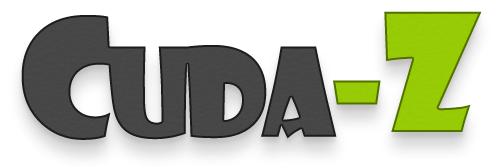
<style>
.page{position:relative;width:500px;height:167px;background:#ffffff}
.page>*{position:absolute;margin:0}
.t1{font:120px "ShowcardGothic-Reg";letter-spacing:-0.05em;color:#444444}
.t2{font:160px "ShowcardGothic-Reg";letter-spacing:-0.05em;color:#444444}
.t3{font:160px "ShowcardGothic-Reg";letter-spacing:-0.05em;color:#96cd00}
</style>
<div class="page">
<p class="t1" style="left:21px;top:15px;width:316px;height:125px"><span class="t2">C</span>UDA</p>
<p class="t3" style="left:333px;top:11px;width:149px;height:121px">-Z</p>
</div>
